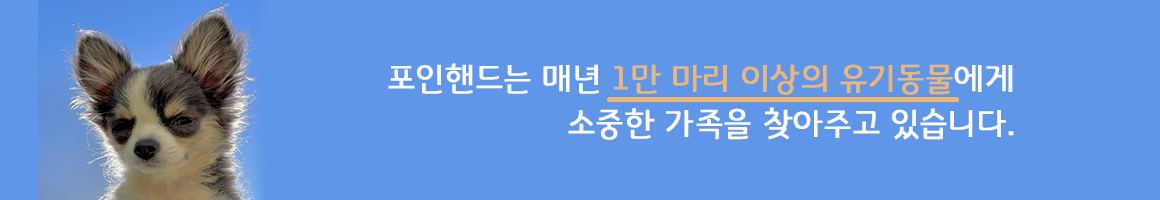
<style>
.page{position:relative;width:1160px;height:200px;background:#5f96e8}
.page>*{position:absolute;margin:0}
.t1{font:34px/45px "GyeonggiTitleL";letter-spacing:-0.01em;color:#fefefe;font-weight:bold}
.t2{font:34px/45px "GyeonggiTitleL";letter-spacing:-0.01em;color:#ebb777;font-weight:bold}
</style>
<div class="page">
<p class="t1" style="left:388px;top:63px;width:626px;height:77px;text-align:right">포인핸드는 매년 <span class="t2">1만 마리 이상의 유기동물</span>에게<br>소중한 가족을 찾아주고 있습니다.</p>
</div>
